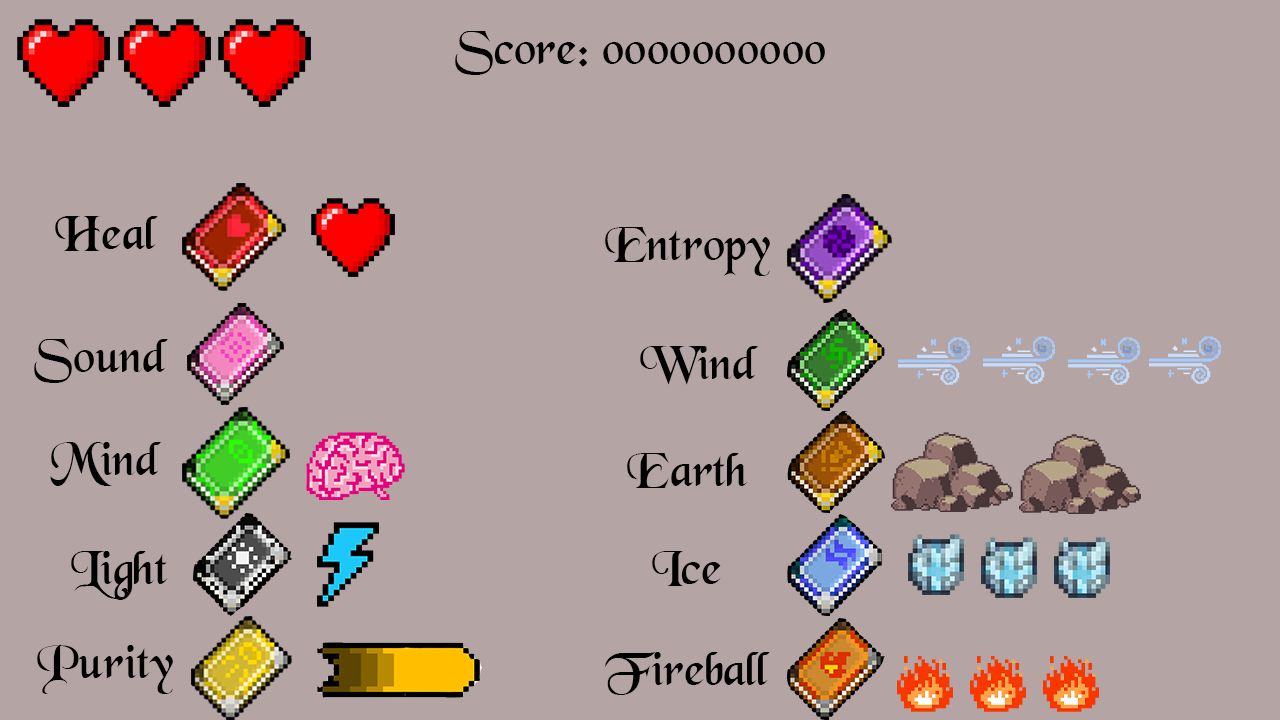
<style>
.page{position:relative;width:1280px;height:720px;background:#b5a4a4}
.page>*{position:absolute;margin:0}
.t1{font:50px "BlackChancery";color:#000000}
</style>
<div class="page">
<p class="t1" style="left:455px;top:31px;width:370px;height:44px">Score: 0000000000</p>
<p class="t1" style="left:55px;top:216px;width:103px;height:35px">Heal</p>
<p class="t1" style="left:605px;top:227px;width:165px;height:49px">Entropy</p>
<p class="t1" style="left:34px;top:339px;width:134px;height:44px">Sound</p>
<p class="t1" style="left:640px;top:346px;width:118px;height:39px">Wind</p>
<p class="t1" style="left:50px;top:442px;width:111px;height:44px">Mind</p>
<p class="t1" style="left:627px;top:453px;width:120px;height:35px">Earth</p>
<p class="t1" style="left:71px;top:551px;width:97px;height:49px">Light</p>
<p class="t1" style="left:652px;top:551px;width:69px;height:35px">Ice</p>
<p class="t1" style="left:37px;top:644px;width:136px;height:50px">Purity</p>
<p class="t1" style="left:605px;top:652px;width:165px;height:43px">Fireball</p>
</div>
